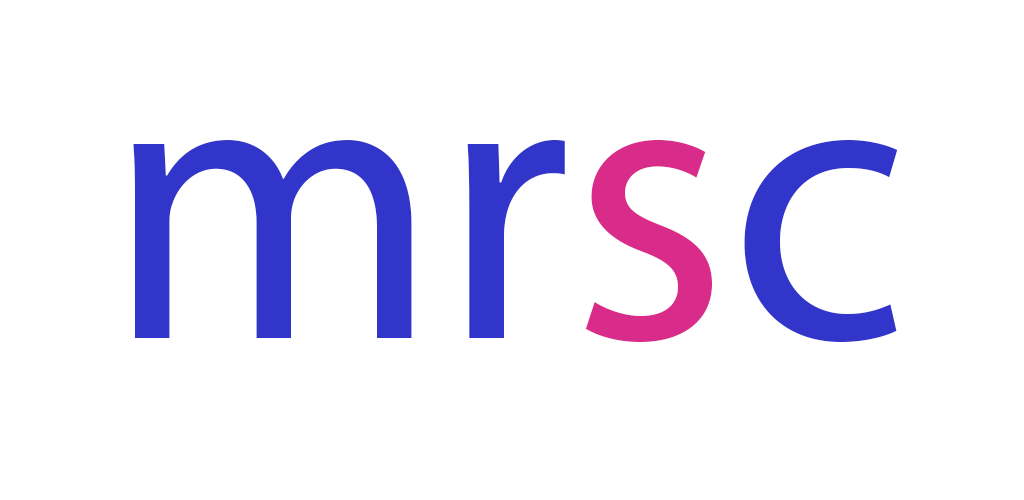
<style>
.page{position:relative;width:1024px;height:500px;background:#ffffff}
.page>*{position:absolute;margin:0}
.t1{font:400px "MyriadPro-Regular";color:#3135ca}
.t2{font:400px "MyriadPro-Regular";color:#d92b89}
</style>
<div class="page">
<p class="t1" style="left:133px;top:139px;width:765px;height:203px">mr<span class="t2">s</span>c</p>
</div>
